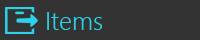
<style>
.page{position:relative;width:200px;height:40px;background:#333333}
.page>*{position:absolute;margin:0}
.t1{font:25px "SegoeUI-Semilight";color:#2cd1ea}
</style>
<div class="page">
<p class="t1" style="left:47px;top:12px;width:56px;height:18px">Items</p>
</div>
